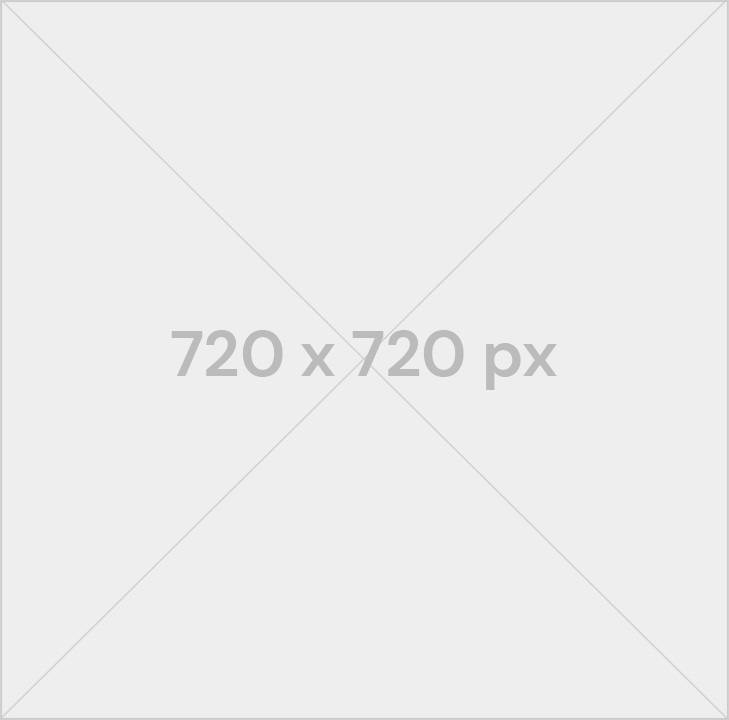
<style>
.page{position:relative;width:729px;height:720px;background:#eeeeee}
.page>*{position:absolute;margin:0}
.t1{font:64px "DMSans-Bold";color:#bbbbbb}
</style>
<div class="page">
<p class="t1" style="left:171px;top:330px;width:386px;height:60px">720 x 720 px</p>
</div>
